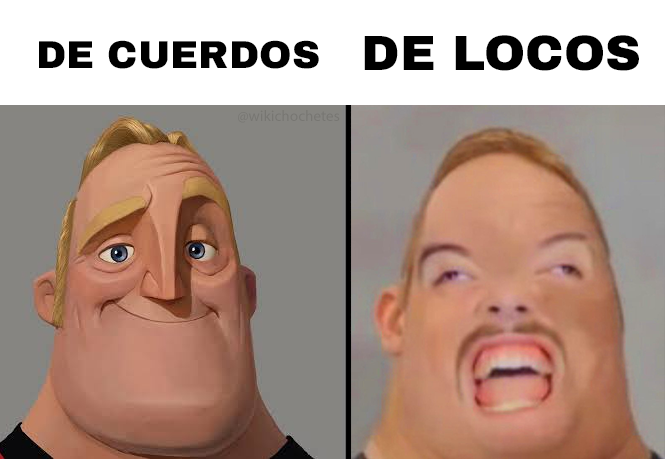
<style>
.page{position:relative;width:665px;height:459px;background:#ffffff}
.page>*{position:absolute;margin:0}
.t1{font:39px "ArchivoBlack-Regular";color:#000000}
.t2{font:49.5px "ArchivoBlack-Regular";color:#000000}
.t3{font:15.3px "MyriadPro-Regular";color:#777672}
</style>
<div class="page">
<p class="t1" style="left:39px;top:40px;width:280px;height:29px">DE CUERDOS</p>
<p class="t2" style="left:364px;top:35px;width:275px;height:36px">DE LOCOS</p>
<p class="t3" style="left:238px;top:110px;width:102px;height:13px">@wikichochetes</p>
</div>
